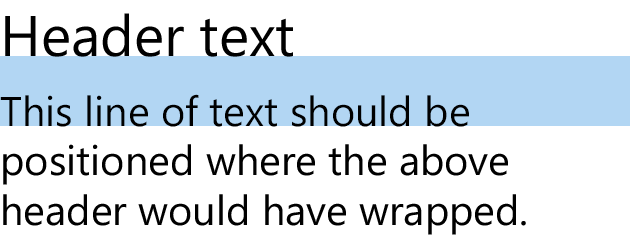
<style>
.page{position:relative;width:630px;height:240px;background:#ffffff}
.page>*{position:absolute;margin:0}
.t1{font:57.4px "SegoeUI";color:#000000}
.t2{font:41.4px "SegoeUI";color:#000000}
</style>
<div class="page">
<p class="t1" style="left:5px;top:13px;width:288px;height:44px">Header text</p>
<p class="t2" style="left:0px;top:94px;width:526px;height:141px">This line of text should be<br>positioned where the above<br>header would have wrapped.</p>
</div>
